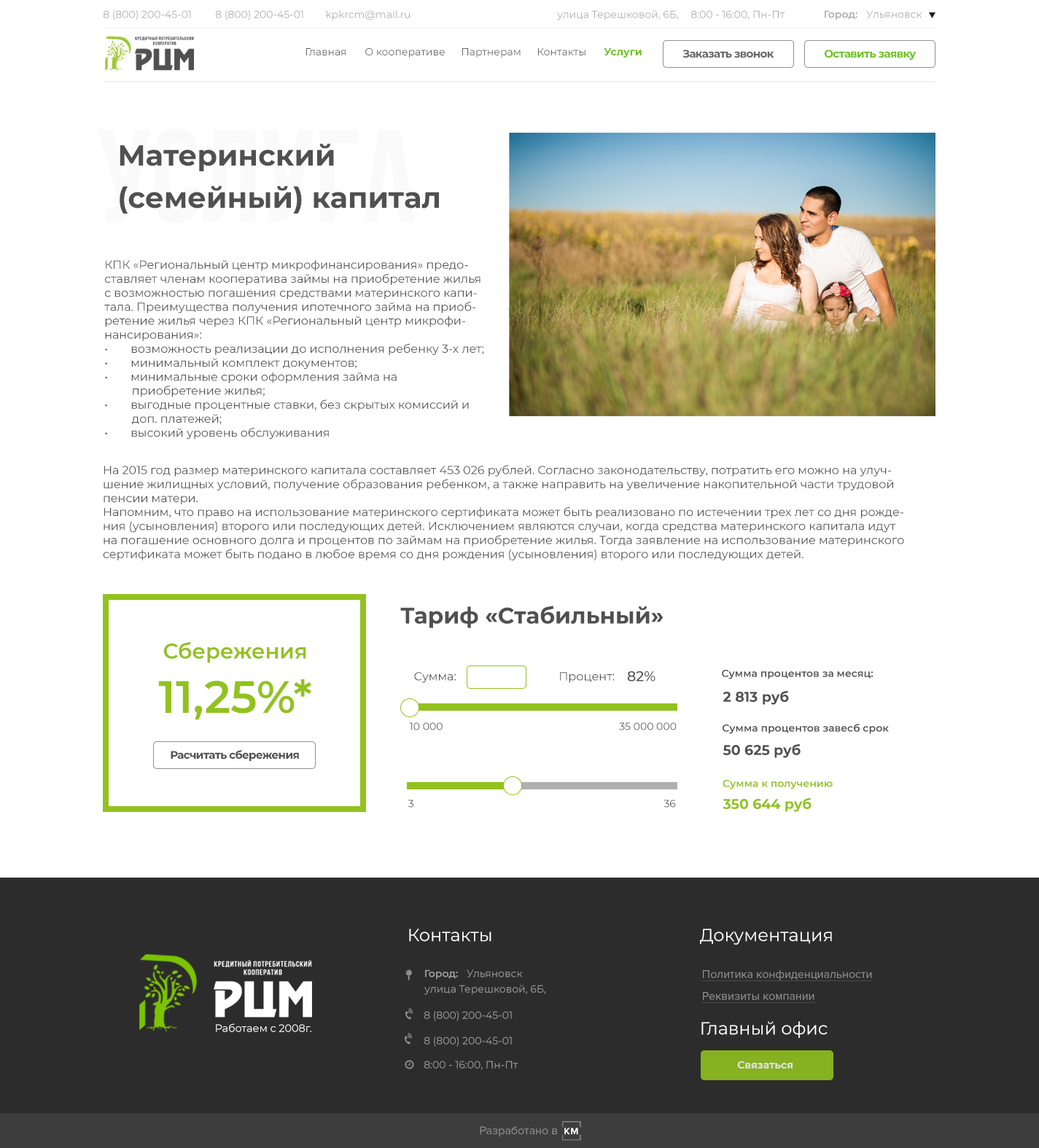
<style>
.page{position:relative;width:1039px;height:1148px;background:#ffffff}
.page>*{position:absolute;margin:0}
.t1{font:10.2px "Montserrat-Regular";color:#adadad}
.t2{font:10.2px "Montserrat-SemiBold";color:#adadad}
.t3{font:10.2px "Montserrat-Regular";color:#666666}
.t4{font:10.2px "Montserrat-Bold";color:#6fc21e}
.t5{font:10.9px "Montserrat-Bold";letter-spacing:-0.04em;color:#666666}
.t6{font:10.9px "Montserrat-Bold";letter-spacing:-0.04em;color:#6fc21e}
.t7{font:29.2px/42.3px "Montserrat-Bold";color:#505050}
.t8{font:11.7px "Montserrat-Regular";color:#505050}
.t9{font:22.6px "Montserrat-Bold";color:#505050}
.t10{font:21.1px "Montserrat-SemiBold";color:#92c21e}
.t11{font:45.2px "Montserrat-SemiBold";color:#92c21e}
.t12{font:13.8px "Montserrat-Medium";color:#505050}
.t13{font:10.2px "Montserrat-SemiBold";color:#505050}
.t14{font:13.8px "Montserrat-Bold";color:#505050}
.t15{font:10.2px "Montserrat-Regular";color:#505050}
.t16{font:10.9px "Montserrat-Bold";letter-spacing:-0.04em;color:#505050}
.t17{font:10.2px "Montserrat-SemiBold";color:#92c21e}
.t18{font:13.8px "Montserrat-Bold";color:#92c21e}
.t19{font:17.5px "Montserrat-Regular";color:#ffffff}
.t20{font:10.2px "Montserrat-Regular";color:#9b9b9b}
.t21{font:10.2px "Montserrat-SemiBold";color:#9b9b9b}
.t22{font:11.7px "ProximaNova-Regular";color:#8f8f8f;text-decoration:underline}
.t23{font:10.5px "Montserrat-Regular";color:#ffffff}
.t24{font:10.2px "Montserrat-Bold";color:#e2e2e2}
.t25{font:11.7px "ProximaNova-Regular";color:#8f8f8f}
</style>
<div class="page">
<p class="t1" style="left:104px;top:10px;width:87px;height:10px">8 (800) 200-45-01</p>
<p class="t1" style="left:216px;top:10px;width:87px;height:10px">8 (800) 200-45-01</p>
<p class="t1" style="left:326px;top:10px;width:84px;height:10px">kpkrcm@mail.ru</p>
<p class="t1" style="left:557px;top:10px;width:122px;height:10px">улица Терешковой, 6Б,</p>
<p class="t1" style="left:691px;top:10px;width:94px;height:10px">8:00 - 16:00, Пн-Пт</p>
<p class="t1" style="left:824px;top:10px;width:98px;height:10px"><span class="t2">Город:   </span>Ульяновск</p>
<p class="t3" style="left:306px;top:48px;width:39px;height:7px">Главная</p>
<p class="t3" style="left:365px;top:48px;width:80px;height:10px">О кооперативе</p>
<p class="t3" style="left:462px;top:48px;width:58px;height:10px">Партнерам</p>
<p class="t3" style="left:538px;top:48px;width:47px;height:7px">Контакты</p>
<p class="t4" style="left:604px;top:48px;width:37px;height:10px">Услуги</p>
<p class="t5" style="left:682px;top:50px;width:92px;height:8px">Заказать звонок</p>
<p class="t6" style="left:824px;top:50px;width:92px;height:10px">Оставить заявку</p>
<p class="t7" style="left:120px;top:144px;width:319px;height:70px">Материнский<br>(семейный) капитал</p>
<p class="t8" style="left:104px;top:259px;width:379px;height:181px">КПК «Региональный центр микрофинансирования» предоставляет членам кооператива займы на приобретение жилья с возможностью погашения средствами материнского капитала. Преимущества получения ипотечного займа на приобретение жилья через КПК «Региональный центр микрофинансирования»:<br>• возможность реализации до исполнения ребенку 3-х лет;<br>• минимальный комплект документов;<br>• минимальные сроки оформления займа на <br>         приобретение жилья;<br>• выгодные процентные ставки, без скрытых комиссий и<br>         доп. платежей;<br>• высокий уровень обслуживания</p>
<p class="t8" style="left:103px;top:465px;width:801px;height:96px">На 2015 год размер материнского капитала составляет 453 026 рублей. Согласно законодательству, потратить его можно на улучшение жилищных условий, получение образования ребенком, а также направить на увеличение накопительной части трудовой пенсии матери. <br>Напомним, что право на использование материнского сертификата может быть реализовано по истечении трех лет со дня рождения (усыновления) второго или последующих детей. Исключением являются случаи, когда средства материнского капитала идут на погашение основного долга и процентов по займам на приобретение жилья. Тогда заявление на использование материнского сертификата может быть подано в любое время со дня рождения (усыновления) второго или последующих детей.</p>
<p class="t9" style="left:400px;top:606px;width:263px;height:22px">Тариф «Стабильный»</p>
<p class="t10" style="left:158px;top:641px;width:153px;height:79px;text-align:center">Сбережения<br><span class="t11">11,25%*</span></p>
<p class="t8" style="left:414px;top:672px;width:42px;height:11px">Сумма:</p>
<p class="t8" style="left:560px;top:672px;width:54px;height:11px">Процент:</p>
<p class="t12" style="left:627px;top:671px;width:28px;height:11px">82%</p>
<p class="t13" style="left:722px;top:669px;width:150px;height:10px">Сумма процентов за месяц:</p>
<p class="t14" style="left:722px;top:690px;width:67px;height:15px">2 813 руб</p>
<p class="t15" style="left:409px;top:722px;width:33px;height:8px">10 000</p>
<p class="t15" style="left:619px;top:722px;width:57px;height:8px">35 000 000</p>
<p class="t13" style="left:722px;top:724px;width:167px;height:10px">Сумма процентов завесб срок</p>
<p class="t14" style="left:722px;top:743px;width:78px;height:15px">50 625 руб</p>
<p class="t16" style="left:171px;top:750px;width:128px;height:11px">Расчитать сбережения</p>
<p class="t17" style="left:722px;top:779px;width:110px;height:10px">Сумма к получению</p>
<p class="t18" style="left:722px;top:797px;width:89px;height:15px">350 644 руб</p>
<p class="t15" style="left:407px;top:800px;width:6px;height:8px">3</p>
<p class="t15" style="left:663px;top:800px;width:13px;height:8px">36</p>
<p class="t19" style="left:409px;top:929px;width:82px;height:13px">Контакты</p>
<p class="t19" style="left:700px;top:929px;width:132px;height:16px">Документация</p>
<p class="t20" style="left:425px;top:969px;width:98px;height:11px"><span class="t21">Город:   </span>Ульяновск</p>
<p class="t22" style="left:701px;top:970px;width:171px;height:11px">Политика конфиденциальности</p>
<p class="t20" style="left:424px;top:985px;width:122px;height:10px">улица Терешковой, 6Б,</p>
<p class="t22" style="left:701px;top:992px;width:114px;height:11px">Реквизиты компании</p>
<p class="t20" style="left:424px;top:1011px;width:88px;height:10px">8 (800) 200-45-01</p>
<p class="t23" style="left:216px;top:1023px;width:95px;height:9px">Работаем с 2008г.</p>
<p class="t19" style="left:701px;top:1021px;width:126px;height:17px">Главный офис</p>
<p class="t20" style="left:424px;top:1036px;width:88px;height:11px">8 (800) 200-45-01</p>
<p class="t20" style="left:424px;top:1061px;width:94px;height:9px">8:00 - 16:00, Пн-Пт</p>
<p class="t24" style="left:737px;top:1061px;width:55px;height:8px">Связаться</p>
<p class="t25" style="left:480px;top:1126px;width:77px;height:11px">Разработано в</p>
</div>
